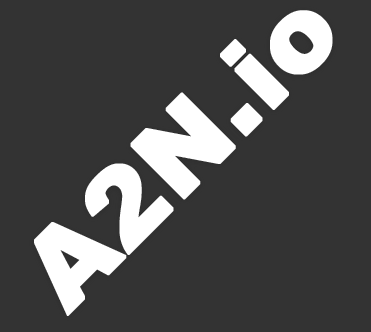
<style>
.page{position:relative;width:371px;height:332px;background:#333333}
.page>*{position:absolute;margin:0}
.t1{font:104.9px "Arial-Black";color:#ffffff;font-weight:bold}
</style>
<div class="page">
<p class="t1" style="left:34px;top:10px;width:299px;height:306px;rotate:-45deg">A2N.io</p>
</div>
